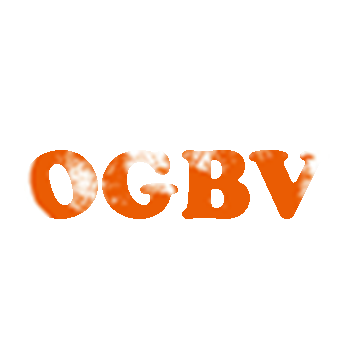
<style>
.page{position:relative;width:354px;height:354px;background:#ffffff}
.page>*{position:absolute;margin:0}
.t1{font:100px "CooperBlack"}
</style>
<div class="page">
<p class="t1" style="left:24px;top:150px;width:306px;height:69px">OGBV</p>
</div>
